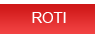
<style>
.page{position:relative;width:95px;height:40px;background:#ffffff}
.page>*{position:absolute;margin:0}
.t1{font:14.7px "ArialMT";color:#ffffff}
</style>
<div class="page">
<p class="t1" style="left:32px;top:12px;width:34px;height:11px">ROTI</p>
</div>
